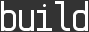
<style>
.page{position:relative;width:89px;height:32px;background:#333333}
.page>*{position:absolute;margin:0}
.t1{font:48px "Monkey";color:#ffffff}
</style>
<div class="page">
<p class="t1" style="left:1px;top:1px;width:87px;height:30px">build</p>
</div>
